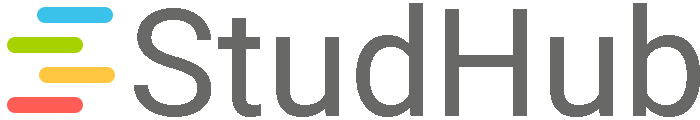
<style>
.page{position:relative;width:700px;height:120px;background:#ffffff}
.page>*{position:absolute;margin:0}
.t1{font:150px "Roboto-Regular";color:#686866}
</style>
<div class="page">
<p class="t1" style="left:134px;top:3px;width:566px;height:114px">StudHub</p>
</div>
